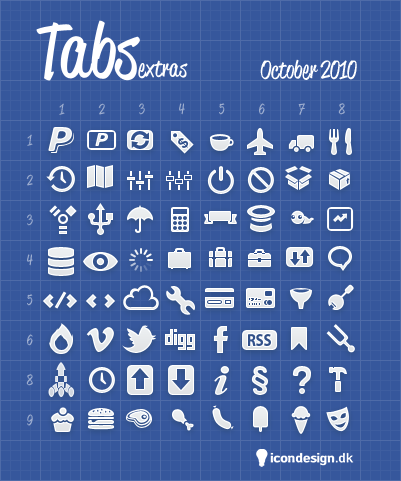
<style>
.page{position:relative;width:401px;height:481px;background:#36579c}
.page>*{position:absolute;margin:0}
.t1{font:24.8px "ReklameScript-RegularDEMO";color:#ffffff}
.t2{font:14.8px/40px "ReklameScript-RegularDEMO";color:#9babce}
</style>
<div class="page">
<p class="t1" style="left:260px;top:59px;width:97px;height:21px">October 2010</p>
<p class="t2" style="left:59px;top:103px;width:286px;height:12px;text-align:center">8<br>7<br>6<br>5<br>4<br>3<br>2<br>1</p>
<p class="t2" style="left:26px;top:134px;width:7px;height:292px;text-align:center">1<br>2<br>3<br>4<br>5<br>6<br>8<br>9</p>
</div>
